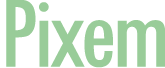
<style>
.page{position:relative;width:165px;height:68px;background:#ffffff}
.page>*{position:absolute;margin:0}
.t1{font:107px "TwCenMT-Condensed";letter-spacing:-0.04em;color:#99cc99}
</style>
<div class="page">
<p class="t1" style="left:6px;top:0px;width:159px;height:68px">Pixem</p>
</div>
